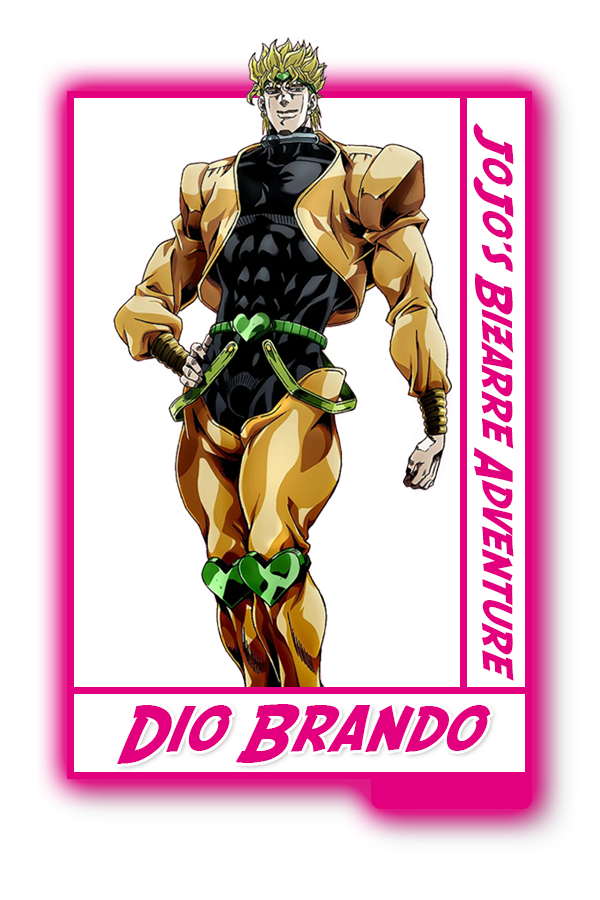
<style>
.page{position:relative;width:600px;height:900px;background:#ffffff}
.page>*{position:absolute;margin:0}
.t1{font:42.4px "SFFedora";color:#e3007e}
.t2{font:65.2px "SFFedora";color:#e3007e}
</style>
<div class="page">
<p class="t1" style="left:473px;top:123px;width:41px;height:558px;rotate:90deg">JoJo's Bizarre Adventure</p>
<p class="t2" style="left:117px;top:704px;width:374px;height:60px">Dio Brando</p>
</div>
